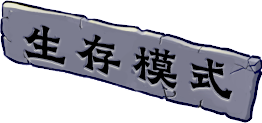
<style>
.page{position:relative;width:262px;height:123px;background:#ffffff}
.page>*{position:absolute;margin:0}
.t1{font:50.1px "GraveBustedStoneLishuSCRoughlyC";letter-spacing:0.14em;color:#000000;scale:1.08 1}
</style>
<div class="page">
<p class="t1" style="left:24px;top:25px;width:208px;height:74px;rotate:12deg">生存模式</p>
</div>
